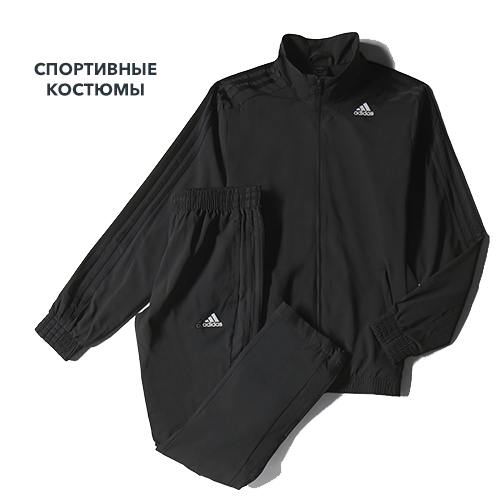
<style>
.page{position:relative;width:500px;height:500px;background:#ffffff}
.page>*{position:absolute;margin:0}
.t1{font:17px "AvenirNextW1G-Bold";color:#2a363b;text-transform:uppercase}
</style>
<div class="page">
<p class="t1" style="left:34px;top:62px;width:123px;height:34px;text-align:center">СПОРТИВНЫЕ<br>КОСТЮМы</p>
</div>
